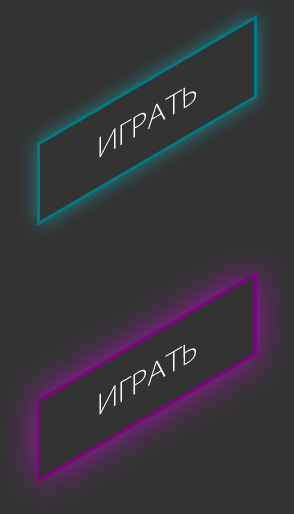
<style>
.page{position:relative;width:294px;height:514px;background:#333333}
.page>*{position:absolute;margin:0}
.t1{font:30px "MyriadPro-LightSemiExt";color:#ffffff;text-transform:uppercase;scale:1.16 1}
</style>
<div class="page">
<p class="t1" style="left:99px;top:87px;width:97px;height:71px;rotate:-30deg">Играть</p>
<p class="t1" style="left:99px;top:344px;width:97px;height:71px;rotate:-30deg">Играть</p>
</div>
